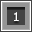
<style>
.page{position:relative;width:32px;height:32px;background:#949494}
.page>*{position:absolute;margin:0}
.t1{font:12px "Verdana";color:#ffffff}
</style>
<div class="page">
<p class="t1" style="left:14px;top:12px;width:5px;height:9px">1</p>
</div>
